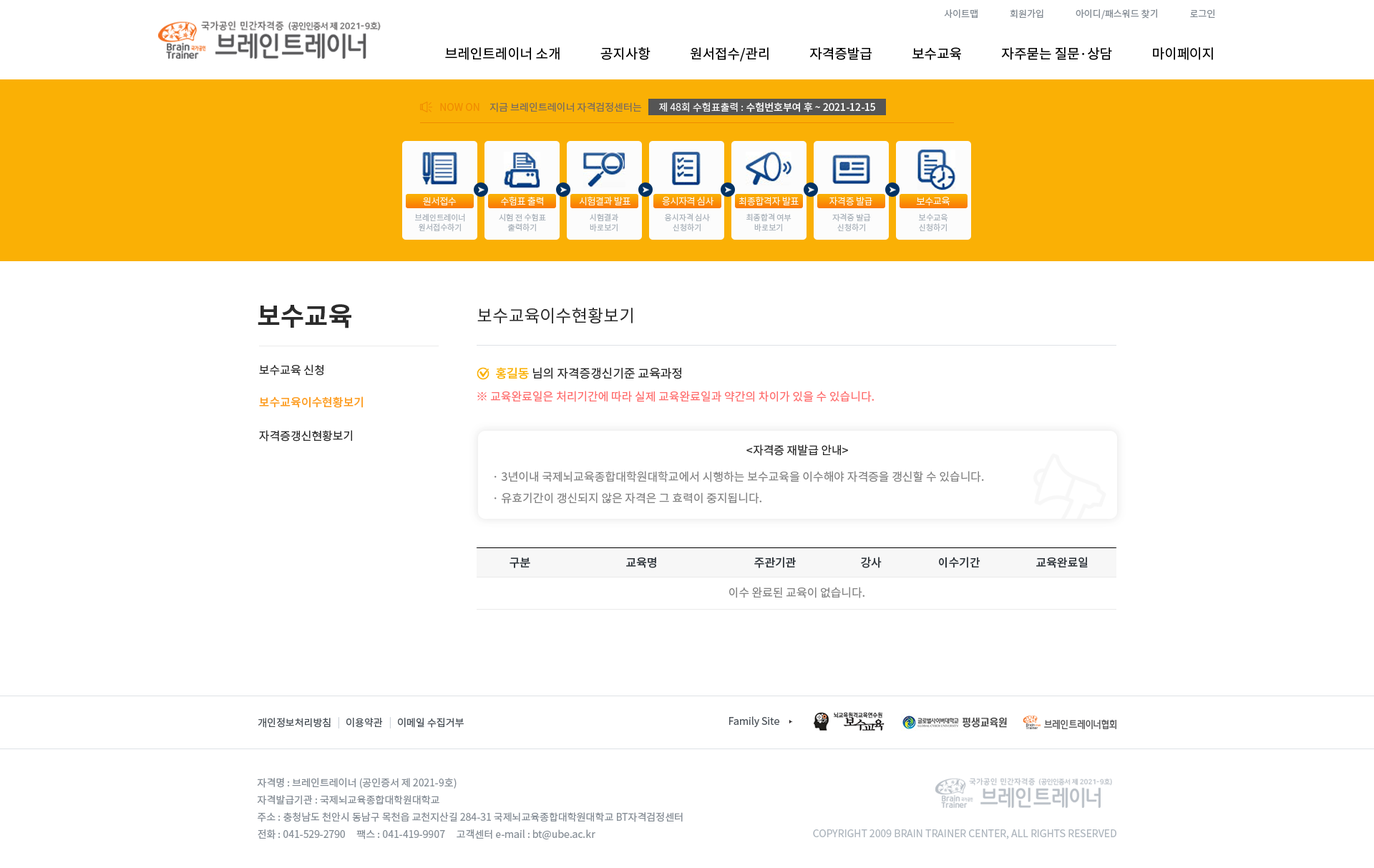
<style>
.page{position:relative;width:1374px;height:868px;background:#ffffff}
.page>*{position:absolute;margin:0}
.t1{font:9.3px "NotoSansCJKkr-Regular";letter-spacing:0.001em;color:#868e96}
.t2{font:13.6px "NotoSansCJKkr-Regular";color:#000000}
.t3{font:10px "NotoSansCJKkr-Regular";color:#f08c00}
.t4{font:10px "NotoSansCJKkr-Regular";color:#7c6d5d}
.t5{font:10px "NotoSansCJKkr-Medium";color:#f8f8f8}
.t6{font:10px "NotoSansCJKkr-Regular";color:#f8f8f8}
.t7{font:9.3px "NotoSansCJKkr-Light";letter-spacing:-0.025em;color:#fcfcfc}
.t8{font:7.9px/10px "NotoSansCJKkr-Regular";color:#adb5bd}
.t9{font:25.8px "NotoSansCJKkr-Bold";color:#2b2b2b}
.t10{font:17.2px "NotoSansCJKkr-Regular";color:#2b2b2b}
.t11{font:11.4px "NotoSansCJKkr-Regular";color:#2b2b2b}
.t12{font:12.2px "NotoSansCJKkr-Regular";color:#2b2b2b}
.t13{font:12.2px "NotoSansCJKkr-Medium";color:#fab30c}
.t14{font:11.4px "NotoSansCJKkr-Medium";color:#fd9f27}
.t15{font:11.4px "NotoSansCJKkr-Regular";color:#ff6b6b}
.t16{font:11.4px "NotoSansCJKkr-Regular";color:#838383}
.t17{font:11.4px "NotoSansCJKkr-Medium";color:#343a40}
.t18{font:10px "NotoSansCJKkr-Regular";color:#495057}
.t19{font:10px "NotoSansCJKkr-Regular";color:#ced4da}
.t20{font:10px/17.2px "NotoSansCJKkr-Regular";color:#868e96}
.t21{font:10px "NotoSansCJKkr-Regular";color:#adb5bd}
</style>
<div class="page">
<p class="t1" style="left:944px;top:9px;width:271px;height:10px">사이트맵               회원가입               아이디/패스워드 찾기               로그인</p>
<p class="t2" style="left:445px;top:47px;width:768px;height:15px">브레인트레이너 소개             공지사항             원서접수/관리             자격증발급             보수교육             자주묻는 질문·상담             마이페이지</p>
<p class="t3" style="left:440px;top:103px;width:39px;height:8px">NOW ON</p>
<p class="t4" style="left:489px;top:102px;width:153px;height:10px">지금 브레인트레이너 자격검정센터는</p>
<p class="t5" style="left:659px;top:102px;width:216px;height:10px"><span class="t6">제 48회 수험표출력 : </span>수험번호부여 후 ~ 2021-12-15</p>
<p class="t7" style="left:423px;top:197px;width:34px;height:9px">원서접수</p>
<p class="t7" style="left:501px;top:196px;width:42px;height:10px">수험표 출력</p>
<p class="t7" style="left:579px;top:196px;width:51px;height:9px">시험결과 발표</p>
<p class="t7" style="left:662px;top:196px;width:52px;height:10px">응시자격 심사</p>
<p class="t7" style="left:738px;top:196px;width:61px;height:10px">최종합격자 발표</p>
<p class="t7" style="left:829px;top:196px;width:43px;height:10px">자격증 발급</p>
<p class="t7" style="left:916px;top:197px;width:34px;height:9px">보수교육</p>
<p class="t8" style="left:415px;top:213px;width:50px;height:19px;text-align:center">브레인트레이너<br>원서접수하기</p>
<p class="t8" style="left:499px;top:213px;width:47px;height:19px;text-align:center">시험 전 수험표<br>출력하기</p>
<p class="t8" style="left:590px;top:213px;width:28px;height:19px;text-align:center">시험결과<br>바로보기</p>
<p class="t8" style="left:665px;top:213px;width:45px;height:19px;text-align:center">응시자격 심사<br>신청하기</p>
<p class="t8" style="left:746px;top:213px;width:45px;height:19px;text-align:center">최종합격 여부<br>바로보기</p>
<p class="t8" style="left:832px;top:213px;width:39px;height:19px;text-align:center">자격증 발급<br>신청하기</p>
<p class="t8" style="left:919px;top:213px;width:29px;height:19px;text-align:center">보수교육<br>신청하기</p>
<p class="t9" style="left:258px;top:304px;width:93px;height:24px">보수교육</p>
<p class="t10" style="left:477px;top:308px;width:156px;height:15px">보수교육이수현황보기</p>
<p class="t11" style="left:259px;top:364px;width:64px;height:12px">보수교육 신청</p>
<p class="t12" style="left:496px;top:367px;width:185px;height:12px"><span class="t13">홍길동 </span>님의 자격증갱신기준 교육과정</p>
<p class="t14" style="left:259px;top:396px;width:104px;height:12px">보수교육이수현황보기</p>
<p class="t15" style="left:477px;top:391px;width:397px;height:11px">※ 교육완료일은 처리기간에 따라 실제 교육완료일과 약간의 차이가 있을 수 있습니다.</p>
<p class="t11" style="left:259px;top:430px;width:93px;height:11px">자격증갱신현황보기</p>
<p class="t11" style="left:746px;top:444px;width:102px;height:12px">&lt;자격증 재발급 안내&gt;</p>
<p class="t16" style="left:494px;top:471px;width:490px;height:11px">· 3년이내 국제뇌교육종합대학원대학교에서 시행하는 보수교육을 이수해야 자격증을 갱신할 수 있습니다.</p>
<p class="t16" style="left:494px;top:492px;width:267px;height:12px">· 유효기간이 갱신되지 않은 자격은 그 효력이 중지됩니다.</p>
<p class="t17" style="left:509px;top:557px;width:21px;height:11px">구분</p>
<p class="t17" style="left:626px;top:557px;width:30px;height:11px">교육명</p>
<p class="t17" style="left:754px;top:557px;width:42px;height:11px">주관기관</p>
<p class="t17" style="left:861px;top:557px;width:21px;height:11px">강사</p>
<p class="t17" style="left:939px;top:557px;width:41px;height:11px">이수기간</p>
<p class="t17" style="left:1036px;top:557px;width:52px;height:11px">교육완료일</p>
<p class="t16" style="left:729px;top:587px;width:135px;height:11px">이수 완료된 교육이 없습니다.</p>
<p class="t18" style="left:258px;top:718px;width:73px;height:10px">개인정보처리방침</p>
<p class="t19" style="left:338px;top:717px;width:1px;height:11px">|</p>
<p class="t18" style="left:346px;top:718px;width:37px;height:10px">이용약관</p>
<p class="t19" style="left:389px;top:717px;width:2px;height:11px">|</p>
<p class="t18" style="left:398px;top:718px;width:66px;height:10px">이메일 수집거부</p>
<p class="t18" style="left:729px;top:716px;width:50px;height:11px">Family Site</p>
<p class="t20" style="left:257px;top:778px;width:426px;height:62px">자격명 : 브레인트레이너 (공인증서 제 2021-9호)<br>자격발급기관 : 국제뇌교육종합대학원대학교<br>주소 : 충청남도 천안시 동남구 목천읍 교천지산길 284-31 국제뇌교육종합대학원대학교 BT자격검정센터<br>전화 : 041-529-2790     팩스 : 041-419-9907     고객센터 e-mail : bt@ube.ac.kr</p>
<p class="t21" style="left:813px;top:829px;width:303px;height:10px">COPYRIGHT 2009 BRAIN TRAINER CENTER, ALL RIGHTS RESERVED</p>
</div>
